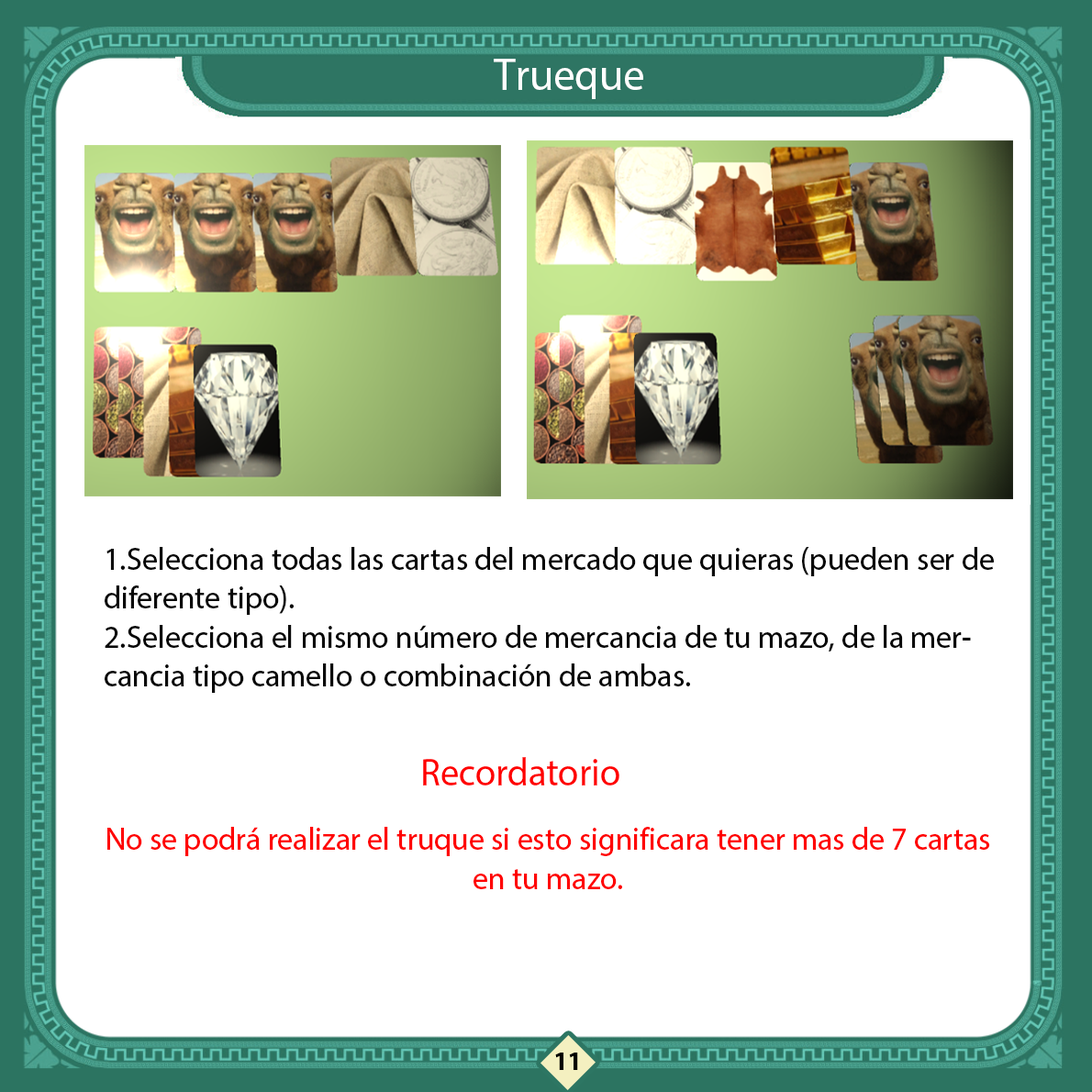
<style>
.page{position:relative;width:1092px;height:1092px;background:#ffffff}
.page>*{position:absolute;margin:0}
.t1{font:45.3px "MyriadHebrew-Regular";color:#ffffff;scale:0.96 1}
.t2{font:32.4px "MyriadHebrew-Regular";color:#070707;scale:0.96 1}
.t3{font:38.8px "MyriadHebrew-Regular";color:#ff0000;scale:0.96 1}
.t4{font:32.4px "MyriadHebrew-Regular";color:#ff0000;scale:0.96 1}
.t5{font:25.9px "MyriadHebrew-Bold";color:#000000}
</style>
<div class="page">
<p class="t1" style="left:494px;top:59px;width:149px;height:40px">Trueque</p>
<p class="t2" style="left:105px;top:547px;width:889px;height:146px;text-align:right">1.Selecciona todas las cartas del mercado que quieras (pueden ser de diferente tipo).<br>2.Selecciona el mismo número de mercancia de tu mazo, de la mercancia tipo camello o combinación de ambas.</p>
<p class="t3" style="left:423px;top:757px;width:196px;height:28px">Recordatorio</p>
<p class="t4" style="left:107px;top:827px;width:883px;height:62px;text-align:center">No se podrá realizar el truque si esto significara tener mas de 7 cartas en tu mazo.</p>
<p class="t5" style="left:555px;top:1053px;width:23px;height:17px">11</p>
</div>
